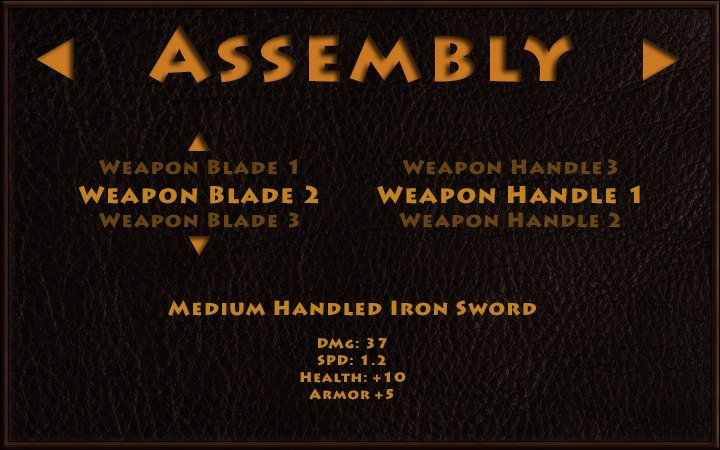
<style>
.page{position:relative;width:720px;height:450px}
.page>*{position:absolute;margin:0}
.t1{font:75px "LithosPro-Black";letter-spacing:0.06em}
.t2{font:20px "LithosPro-Black";letter-spacing:0.06em;color:#644310}
.t3{font:20px "LithosPro-Black";letter-spacing:0.06em;color:#654411}
.t4{font:24px "LithosPro-Black";letter-spacing:0.06em;color:#c1841c}
.t5{font:20px "LithosPro-Black";letter-spacing:0.06em;color:#c1841c}
.t6{font:14px "LithosPro-Black";letter-spacing:0.06em;color:#c1841c}
</style>
<div class="page">
<p class="t1" style="left:149px;top:25px;width:425px;height:59px">Assembly</p>
<p class="t2" style="left:99px;top:159px;width:200px;height:69px;text-align:center">Weapon Blade 1<br><br>Weapon Blade 3</p>
<p class="t3" style="left:399px;top:159px;width:221px;height:69px;text-align:center">Weapon Handle3<br><br>Weapon Handle 2</p>
<p class="t4" style="left:78px;top:185px;width:240px;height:19px"><span class="t5"><br></span>Weapon Blade 2</p>
<p class="t4" style="left:377px;top:185px;width:263px;height:19px"><span class="t5"><br></span>Weapon Handle 1</p>
<p class="t6" style="left:168px;top:300px;width:368px;height:100px;text-align:center"><span class="t5">Medium Handled Iron Sword<br></span><br>DMg: 37<br>SPD: 1.2<br>Health: +10<br>Armor +5</p>
</div>
